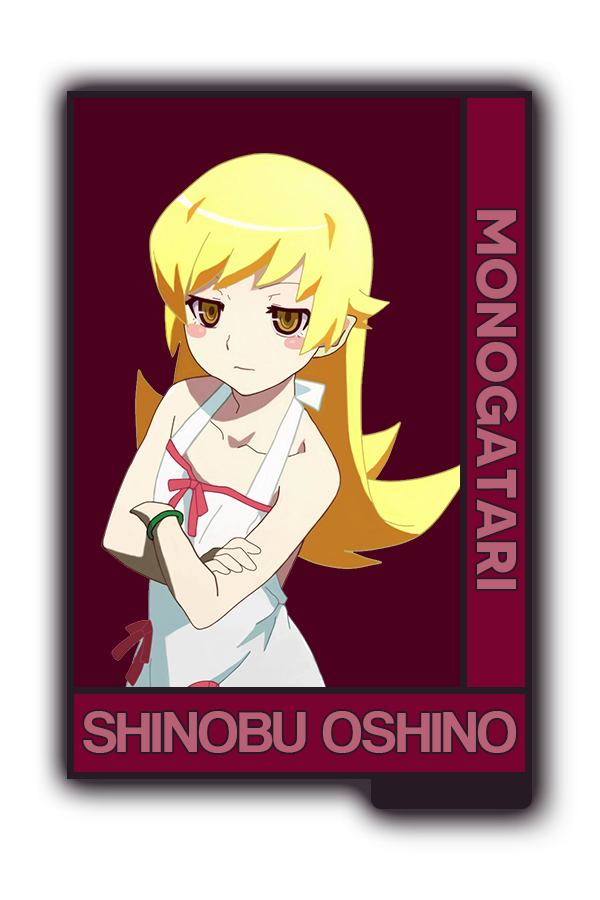
<style>
.page{position:relative;width:600px;height:900px;background:#ffffff}
.page>*{position:absolute;margin:0}
.t1{font:55.8px "MADETOMMY-Bold";color:#b86076}
.t2{font:59.9px "CoolveticaRg-Regular";color:#b86076}
</style>
<div class="page">
<p class="t1" style="left:476px;top:210px;width:41px;height:379px;rotate:90deg">MONOGATARI</p>
<p class="t2" style="left:83px;top:711px;width:434px;height:42px">SHINOBU OSHINO</p>
</div>
